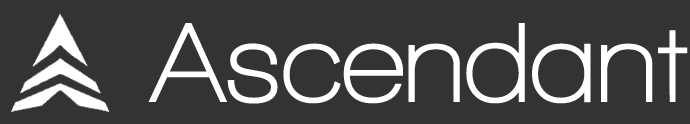
<style>
.page{position:relative;width:690px;height:124px;background:#333333}
.page>*{position:absolute;margin:0}
.t1{font:116.4px "WalkwayBold";color:#ffffff}
</style>
<div class="page">
<p class="t1" style="left:148px;top:23px;width:540px;height:81px">Ascendant</p>
</div>
